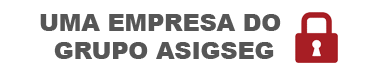
<style>
.page{position:relative;width:388px;height:71px;background:#ffffff}
.page>*{position:absolute;margin:0}
.t1{font:23.7px "Arial-Black";color:#565656}
</style>
<div class="page">
<p class="t1" style="left:40px;top:14px;width:241px;height:45px;text-align:center">UMA EMPRESA DO <br>GRUPO ASIGSEG</p>
</div>
